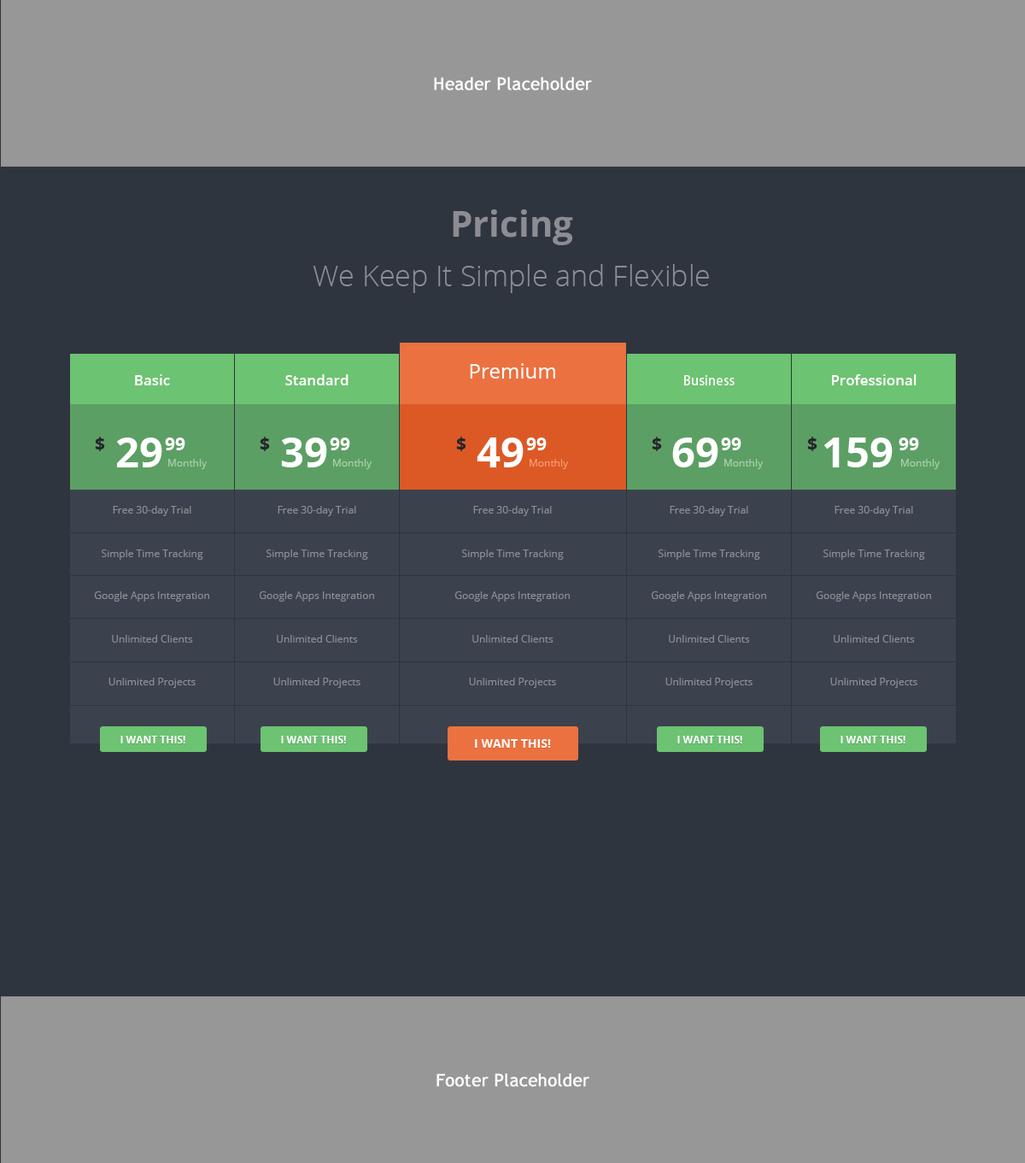
<style>
.page{position:relative;width:1025px;height:1163px;background:#2e353f}
.page>*{position:absolute;margin:0}
.t1{font:17.1px "TrebuchetMS";color:#ffffff;font-weight:bold}
.t2{font:35.9px "OpenSans-Bold";color:#8d8c93}
.t3{font:29.1px "OpenSans-Light";color:#8d8c93}
.t4{font:20.5px "OpenSans";color:#ffffff}
.t5{font:14.5px "OpenSans-Semibold";color:#ffffff}
.t6{font:14.5px "MyriadPro-Regular";color:#ffffff}
.t7{font:17.9px "OpenSans-Bold";color:#25242c}
.t8{font:41.9px "OpenSans-Bold";color:#ffffff}
.t9{font:17.9px "OpenSans-Bold";color:#ffffff}
.t10{font:10.3px "OpenSans";color:#aacfad}
.t11{font:10.3px "OpenSans";color:#f99973}
.t12{font:10.3px "OpenSans";color:#8d8c93}
.t13{font:10.3px "OpenSans-Bold";color:#ffffff;text-transform:uppercase}
.t14{font:12px "OpenSans-Bold";color:#ffffff;text-transform:uppercase}
</style>
<div class="page">
<p class="t1" style="left:434px;top:77px;width:158px;height:14px">Header Placeholder</p>
<p class="t2" style="left:453px;top:209px;width:120px;height:36px">Pricing</p>
<p class="t3" style="left:313px;top:264px;width:396px;height:29px">We Keep It Simple and Flexible</p>
<p class="t4" style="left:470px;top:363px;width:85px;height:16px">Premium</p>
<p class="t5" style="left:135px;top:374px;width:35px;height:11px">Basic</p>
<p class="t5" style="left:285px;top:374px;width:64px;height:11px">Standard</p>
<p class="t6" style="left:684px;top:375px;width:51px;height:10px">Business</p>
<p class="t5" style="left:832px;top:374px;width:85px;height:11px">Professional</p>
<p class="t7" style="left:95px;top:437px;width:10px;height:14px">$</p>
<p class="t8" style="left:117px;top:437px;width:45px;height:30px">29</p>
<p class="t9" style="left:165px;top:437px;width:20px;height:13px">99</p>
<p class="t7" style="left:260px;top:437px;width:10px;height:14px">$</p>
<p class="t8" style="left:281px;top:437px;width:46px;height:30px">39</p>
<p class="t9" style="left:330px;top:437px;width:20px;height:13px">99</p>
<p class="t7" style="left:456px;top:437px;width:11px;height:14px">$</p>
<p class="t8" style="left:477px;top:437px;width:47px;height:30px">49</p>
<p class="t9" style="left:526px;top:437px;width:21px;height:13px">99</p>
<p class="t7" style="left:652px;top:437px;width:10px;height:14px">$</p>
<p class="t8" style="left:672px;top:437px;width:47px;height:30px">69</p>
<p class="t9" style="left:721px;top:437px;width:21px;height:13px">99</p>
<p class="t7" style="left:807px;top:437px;width:11px;height:14px">$</p>
<p class="t8" style="left:825px;top:437px;width:68px;height:30px">159</p>
<p class="t9" style="left:899px;top:437px;width:20px;height:13px">99</p>
<p class="t10" style="left:168px;top:459px;width:39px;height:10px">Monthly</p>
<p class="t10" style="left:333px;top:459px;width:39px;height:10px">Monthly</p>
<p class="t11" style="left:530px;top:459px;width:38px;height:10px">Monthly</p>
<p class="t10" style="left:725px;top:459px;width:38px;height:10px">Monthly</p>
<p class="t10" style="left:901px;top:459px;width:39px;height:10px">Monthly</p>
<p class="t12" style="left:113px;top:506px;width:78px;height:10px">Free 30-day Trial</p>
<p class="t12" style="left:278px;top:506px;width:78px;height:10px">Free 30-day Trial</p>
<p class="t12" style="left:473px;top:506px;width:79px;height:10px">Free 30-day Trial</p>
<p class="t12" style="left:670px;top:506px;width:79px;height:10px">Free 30-day Trial</p>
<p class="t12" style="left:835px;top:506px;width:78px;height:10px">Free 30-day Trial</p>
<p class="t12" style="left:102px;top:549px;width:101px;height:11px">Simple Time Tracking</p>
<p class="t12" style="left:267px;top:549px;width:101px;height:11px">Simple Time Tracking</p>
<p class="t12" style="left:462px;top:549px;width:102px;height:11px">Simple Time Tracking</p>
<p class="t12" style="left:659px;top:549px;width:101px;height:11px">Simple Time Tracking</p>
<p class="t12" style="left:824px;top:549px;width:101px;height:11px">Simple Time Tracking</p>
<p class="t12" style="left:94px;top:591px;width:115px;height:11px">Google Apps Integration</p>
<p class="t12" style="left:259px;top:591px;width:115px;height:11px">Google Apps Integration</p>
<p class="t12" style="left:455px;top:591px;width:115px;height:11px">Google Apps Integration</p>
<p class="t12" style="left:651px;top:591px;width:115px;height:11px">Google Apps Integration</p>
<p class="t12" style="left:816px;top:591px;width:115px;height:11px">Google Apps Integration</p>
<p class="t12" style="left:112px;top:635px;width:81px;height:8px">Unlimited Clients</p>
<p class="t12" style="left:277px;top:635px;width:81px;height:8px">Unlimited Clients</p>
<p class="t12" style="left:473px;top:635px;width:81px;height:8px">Unlimited Clients</p>
<p class="t12" style="left:669px;top:635px;width:81px;height:8px">Unlimited Clients</p>
<p class="t12" style="left:834px;top:635px;width:81px;height:8px">Unlimited Clients</p>
<p class="t12" style="left:109px;top:678px;width:87px;height:10px">Unlimited Projects</p>
<p class="t12" style="left:273px;top:678px;width:88px;height:10px">Unlimited Projects</p>
<p class="t12" style="left:469px;top:678px;width:87px;height:10px">Unlimited Projects</p>
<p class="t12" style="left:666px;top:678px;width:87px;height:10px">Unlimited Projects</p>
<p class="t12" style="left:831px;top:678px;width:87px;height:10px">Unlimited Projects</p>
<p class="t13" style="left:120px;top:736px;width:65px;height:7px">I Want this!</p>
<p class="t13" style="left:281px;top:736px;width:65px;height:7px">I Want this!</p>
<p class="t13" style="left:678px;top:736px;width:65px;height:7px">I Want this!</p>
<p class="t13" style="left:841px;top:736px;width:65px;height:7px">I Want this!</p>
<p class="t14" style="left:475px;top:739px;width:76px;height:9px">I Want this!</p>
<p class="t1" style="left:437px;top:1073px;width:153px;height:14px">Footer Placeholder</p>
</div>
